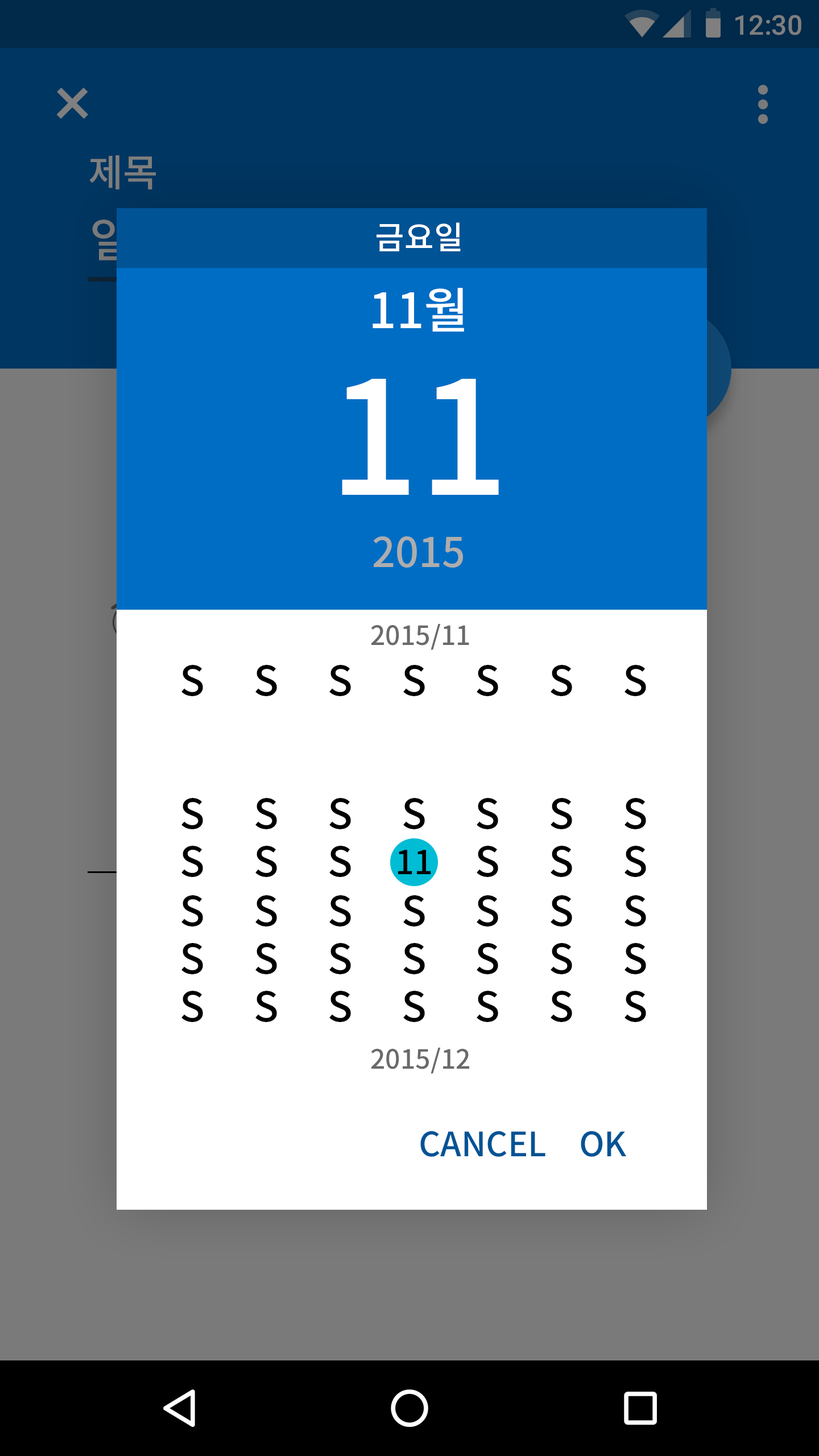
<style>
.page{position:relative;width:819px;height:1456px;background:#ffffff}
.page>*{position:absolute;margin:0}
.t1{font:27.3px "Roboto-Medium";color:#7f7f7f}
.t2{font:38px "NotoSansCJKkr-Medium";color:#7e7e7e}
.t3{font:47.1px "NotoSansCJKkr-Medium";color:#005395}
.t4{font:31.9px "NotoSansCJKkr-Medium";color:#ffffff}
.t5{font:48.8px "NotoSansCJKkr-Medium";color:#ffffff}
.t6{font:157.7px "NotoSansCJKkr-Medium";color:#ffffff}
.t7{font:40.9px "NotoSansCJKkr-Medium";color:#adadad}
.t8{font:26.4px "NotoSansCJKkr-Medium";color:#6a6a6a}
.t9{font:40.9px "NotoSansCJKkr-Medium";color:#000000}
.t10{font:41px "NotoSansCJKkr-Medium";color:#000000}
.t11{font:33.1px "NotoSansCJKkr-Medium";color:#000000}
.t12{font:33.6px "NotoSansCJKkr-Medium";color:#005395}
</style>
<div class="page">
<p class="t1" style="left:735px;top:15px;width:66px;height:20px">12:30</p>
<p class="t2" style="left:89px;top:155px;width:67px;height:34px">제목</p>
<p class="t3" style="left:92px;top:218px;width:208px;height:43px">일하러가기</p>
<p class="t4" style="left:377px;top:222px;width:84px;height:29px">금요일</p>
<p class="t5" style="left:373px;top:288px;width:91px;height:44px">11월</p>
<p class="t6" style="left:342px;top:379px;width:157px;height:116px">11</p>
<p class="t7" style="left:373px;top:536px;width:90px;height:32px">2015</p>
<p class="t8" style="left:371px;top:624px;width:98px;height:26px">2015/11</p>
<p class="t9" style="left:181px;top:665px;width:22px;height:31px">S</p>
<p class="t9" style="left:255px;top:665px;width:22px;height:31px">S</p>
<p class="t9" style="left:329px;top:665px;width:22px;height:31px">S</p>
<p class="t9" style="left:403px;top:665px;width:22px;height:31px">S</p>
<p class="t9" style="left:477px;top:665px;width:21px;height:31px">S</p>
<p class="t9" style="left:551px;top:665px;width:21px;height:31px">S</p>
<p class="t9" style="left:624px;top:665px;width:22px;height:31px">S</p>
<p class="t10" style="left:181px;top:798px;width:22px;height:31px">S</p>
<p class="t10" style="left:255px;top:798px;width:22px;height:31px">S</p>
<p class="t10" style="left:329px;top:798px;width:22px;height:31px">S</p>
<p class="t10" style="left:403px;top:798px;width:22px;height:31px">S</p>
<p class="t10" style="left:477px;top:798px;width:21px;height:31px">S</p>
<p class="t10" style="left:551px;top:798px;width:21px;height:31px">S</p>
<p class="t10" style="left:624px;top:798px;width:22px;height:31px">S</p>
<p class="t10" style="left:181px;top:846px;width:22px;height:31px">S</p>
<p class="t10" style="left:255px;top:846px;width:22px;height:31px">S</p>
<p class="t10" style="left:329px;top:846px;width:22px;height:31px">S</p>
<p class="t10" style="left:477px;top:846px;width:21px;height:31px">S</p>
<p class="t10" style="left:551px;top:846px;width:21px;height:31px">S</p>
<p class="t10" style="left:624px;top:846px;width:22px;height:31px">S</p>
<p class="t11" style="left:398px;top:850px;width:33px;height:24px">11</p>
<p class="t10" style="left:181px;top:895px;width:22px;height:31px">S</p>
<p class="t10" style="left:255px;top:895px;width:22px;height:31px">S</p>
<p class="t10" style="left:329px;top:895px;width:22px;height:31px">S</p>
<p class="t10" style="left:403px;top:895px;width:22px;height:31px">S</p>
<p class="t10" style="left:477px;top:895px;width:21px;height:31px">S</p>
<p class="t10" style="left:551px;top:895px;width:21px;height:31px">S</p>
<p class="t10" style="left:624px;top:895px;width:22px;height:31px">S</p>
<p class="t10" style="left:181px;top:943px;width:22px;height:31px">S</p>
<p class="t10" style="left:255px;top:943px;width:22px;height:31px">S</p>
<p class="t10" style="left:329px;top:943px;width:22px;height:31px">S</p>
<p class="t10" style="left:403px;top:943px;width:22px;height:31px">S</p>
<p class="t10" style="left:477px;top:943px;width:21px;height:31px">S</p>
<p class="t10" style="left:551px;top:943px;width:21px;height:31px">S</p>
<p class="t10" style="left:624px;top:943px;width:22px;height:31px">S</p>
<p class="t10" style="left:181px;top:991px;width:22px;height:31px">S</p>
<p class="t10" style="left:255px;top:991px;width:22px;height:31px">S</p>
<p class="t10" style="left:329px;top:991px;width:22px;height:31px">S</p>
<p class="t10" style="left:403px;top:991px;width:22px;height:31px">S</p>
<p class="t10" style="left:477px;top:991px;width:21px;height:31px">S</p>
<p class="t10" style="left:551px;top:991px;width:21px;height:31px">S</p>
<p class="t10" style="left:624px;top:991px;width:22px;height:31px">S</p>
<p class="t8" style="left:371px;top:1048px;width:98px;height:26px">2015/12</p>
<p class="t12" style="left:420px;top:1131px;width:125px;height:26px">CANCEL</p>
<p class="t12" style="left:581px;top:1131px;width:45px;height:26px">OK</p>
</div>
